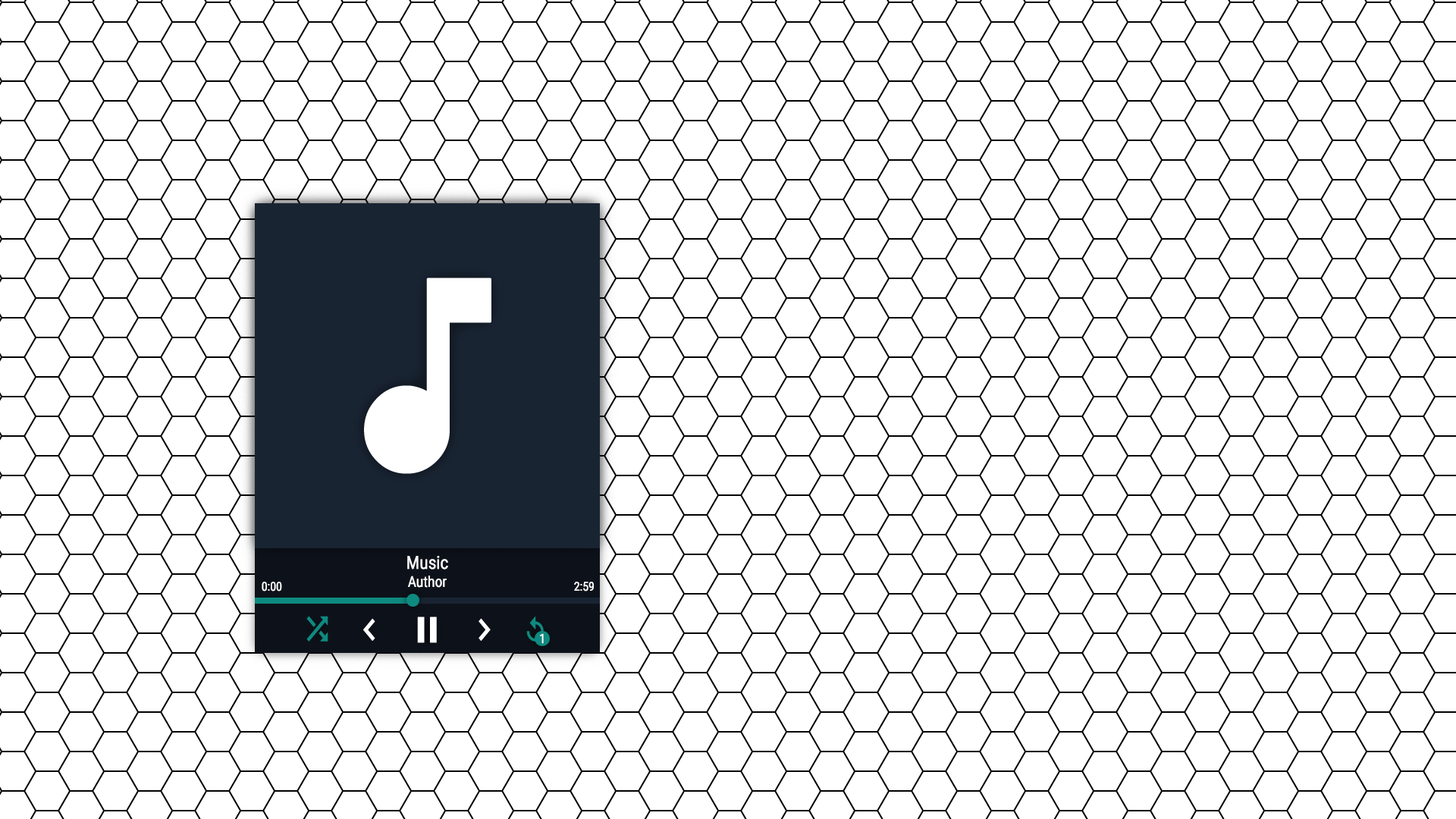
<style>
.page{position:relative;width:1456px;height:819px;background:#ffffff}
.page>*{position:absolute;margin:0}
.t1{font:15px "Roboto-Regular";color:#ffffff;font-weight:bold;scale:0.83 1}
.t2{font:18px "Roboto-Regular";color:#ffffff;font-weight:bold;scale:0.83 1}
.t3{font:12.1px "Roboto-Regular";color:#ffffff;font-weight:bold;scale:0.83 1}
.t4{font:12.9px "Roboto-Regular";color:#ffffff;font-weight:bold;scale:0.83 1}
</style>
<div class="page">
<p class="t1" style="left:407px;top:556px;width:41px;height:32px;text-align:center"><span class="t2">Music<br></span>Author</p>
<p class="t3" style="left:262px;top:582px;width:20px;height:9px">0:00</p>
<p class="t3" style="left:574px;top:582px;width:20px;height:9px">2:59</p>
<p class="t4" style="left:540px;top:633px;width:4px;height:11px">1</p>
</div>
